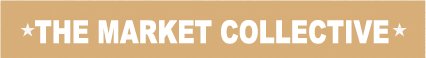
<style>
.page{position:relative;width:426px;height:58px;background:#d7ae78}
.page>*{position:absolute;margin:0}
.t1{font:31.6px "Arial-Black";color:#ffffff;scale:0.76 1}
</style>
<div class="page">
<p class="t1" style="left:35px;top:20px;width:354px;height:24px">THE MARKET COLLECTIVE</p>
</div>
